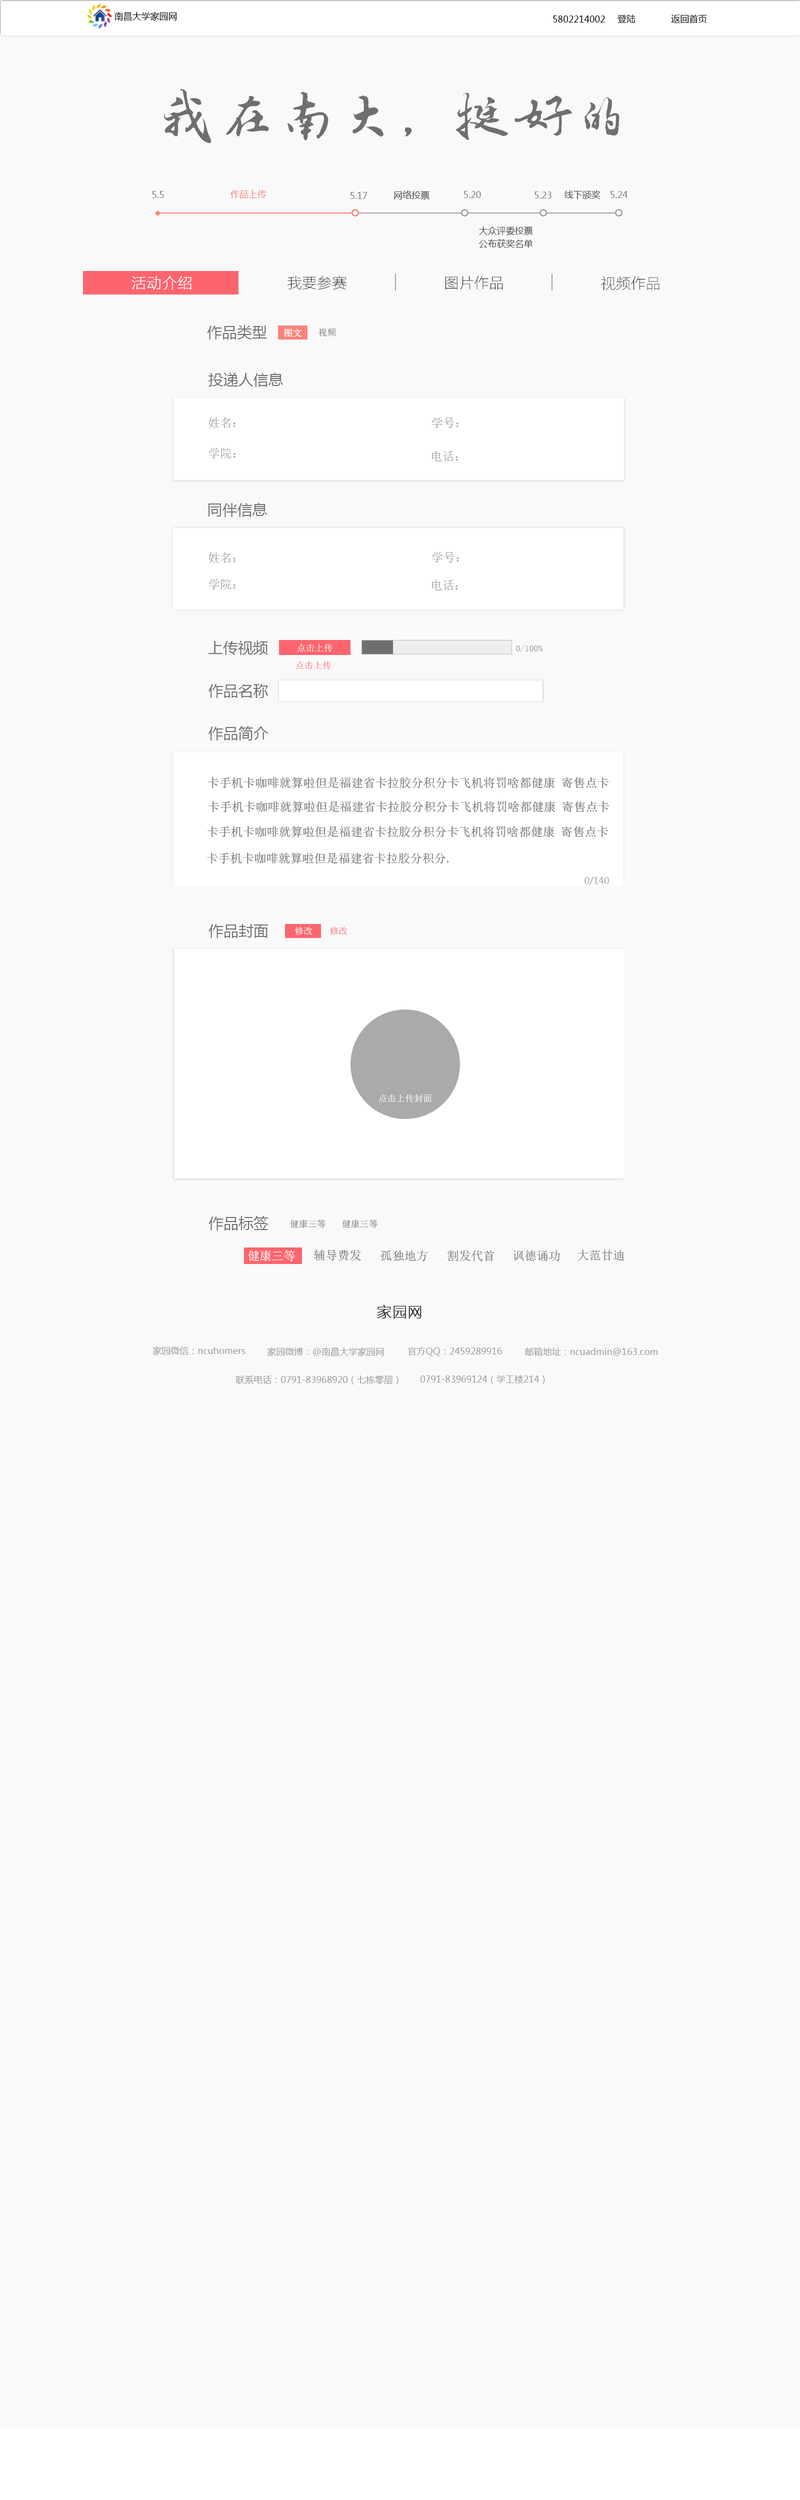
<style>
.page{position:relative;width:800px;height:2500px;background:#f9f9f9}
.page>*{position:absolute;margin:0}
.t1{font:9px "MicrosoftYaHei";color:#000000}
.t2{font:60px "FZZJ-LJDFONT";color:#6f6f6f}
.t3{font:9px "MicrosoftYaHei";color:#808080}
.t4{font:9px "MicrosoftYaHei";color:#fc837a}
.t5{font:9px "MicrosoftYaHei";color:#494949}
.t6{font:15px "FZLTCXHJW--GB1-0";color:#ffffff;font-weight:bold}
.t7{font:15px "FZLTCXHJW--GB1-0";color:#000000}
.t8{font:15px "MicrosoftYaHei";color:#6f6f6f}
.t9{font:9px "SimSun";color:#ffffff;font-weight:bold}
.t10{font:9px "SimSun";color:#6f6f6f}
.t11{font:12px "SimSun";color:#9e9e9e}
.t12{font:9px "SimSun";color:#ffffff}
.t13{font:9px "SimSun";color:#a0a0a0}
.t14{font:9px "SimSun";color:#fd656e}
.t15{font:9px "MicrosoftYaHei";color:#a4a4a4}
.t16{font:12px "SimSun";color:#ffffff}
.t17{font:12px "SimSun";color:#6f6f6f}
.t18{font:15px "FZLTCXHJW--GB1-0";color:#010101;font-weight:bold}
.t19{font:9px "MicrosoftYaHei";color:#9c9c9c}
</style>
<div class="page">
<p class="t1" style="left:114px;top:12px;width:63px;height:9px">南昌大学家园网</p>
<p class="t1" style="left:553px;top:16px;width:52px;height:6px">5802214002</p>
<p class="t1" style="left:618px;top:14px;width:18px;height:9px">登陆</p>
<p class="t1" style="left:671px;top:14px;width:36px;height:9px">返回首页</p>
<p class="t2" style="left:164px;top:89px;width:456px;height:55px">我在南大，挺好的</p>
<p class="t3" style="left:152px;top:191px;width:12px;height:7px">5.5</p>
<p class="t4" style="left:230px;top:190px;width:36px;height:8px">作品上传</p>
<p class="t3" style="left:350px;top:192px;width:18px;height:7px">5.17</p>
<p class="t5" style="left:394px;top:190px;width:36px;height:10px">网络投票</p>
<p class="t3" style="left:464px;top:191px;width:17px;height:7px">5.20</p>
<p class="t3" style="left:534px;top:192px;width:18px;height:6px">5.23</p>
<p class="t5" style="left:564px;top:190px;width:36px;height:9px">线下颁奖</p>
<p class="t3" style="left:610px;top:191px;width:18px;height:7px">5.24</p>
<p class="t5" style="left:479px;top:226px;width:54px;height:10px">大众评委投票</p>
<p class="t5" style="left:479px;top:239px;width:54px;height:9px">公布获奖名单</p>
<p class="t6" style="left:132px;top:276px;width:60px;height:14px">活动介绍</p>
<p class="t7" style="left:288px;top:276px;width:59px;height:14px">我要参赛</p>
<p class="t7" style="left:446px;top:276px;width:56px;height:14px">图片作品</p>
<p class="t7" style="left:601px;top:276px;width:59px;height:14px">视频作品</p>
<p class="t8" style="left:207px;top:325px;width:60px;height:15px">作品类型</p>
<p class="t9" style="left:284px;top:328px;width:18px;height:9px">图文</p>
<p class="t10" style="left:318px;top:328px;width:18px;height:8px">视频</p>
<p class="t8" style="left:208px;top:372px;width:76px;height:15px">投递人信息</p>
<p class="t11" style="left:208px;top:417px;width:28px;height:11px">姓名：</p>
<p class="t11" style="left:432px;top:417px;width:26px;height:11px">学号：</p>
<p class="t11" style="left:208px;top:448px;width:28px;height:11px">学院：</p>
<p class="t11" style="left:432px;top:450px;width:26px;height:12px">电话：</p>
<p class="t8" style="left:208px;top:502px;width:60px;height:15px">同伴信息</p>
<p class="t11" style="left:208px;top:552px;width:28px;height:12px">姓名：</p>
<p class="t11" style="left:432px;top:552px;width:27px;height:11px">学号：</p>
<p class="t11" style="left:208px;top:578px;width:28px;height:12px">学院：</p>
<p class="t11" style="left:432px;top:580px;width:26px;height:11px">电话：</p>
<p class="t8" style="left:208px;top:640px;width:60px;height:15px">上传视频</p>
<p class="t12" style="left:298px;top:644px;width:34px;height:8px">点击上传</p>
<p class="t13" style="left:516px;top:644px;width:27px;height:8px">0/100%</p>
<p class="t14" style="left:296px;top:661px;width:35px;height:9px">点击上传</p>
<p class="t8" style="left:208px;top:684px;width:60px;height:14px">作品名称</p>
<p class="t8" style="left:208px;top:726px;width:60px;height:14px">作品简介</p>
<p class="t15" style="left:584px;top:877px;width:25px;height:8px">0/140</p>
<p class="t8" style="left:208px;top:924px;width:60px;height:14px">作品封面</p>
<p class="t12" style="left:294px;top:926px;width:18px;height:9px">修改</p>
<p class="t14" style="left:330px;top:926px;width:18px;height:9px"><span class="t10"> </span>修改</p>
<p class="t12" style="left:378px;top:1094px;width:54px;height:8px">点击上传封面</p>
<p class="t8" style="left:208px;top:1216px;width:60px;height:14px">作品标签</p>
<p class="t10" style="left:290px;top:1220px;width:36px;height:8px">健康三等</p>
<p class="t10" style="left:342px;top:1220px;width:36px;height:8px">健康三等</p>
<p class="t16" style="left:248px;top:1250px;width:47px;height:12px">健康三等</p>
<p class="t17" style="left:314px;top:1250px;width:47px;height:11px">辅导费发</p>
<p class="t17" style="left:380px;top:1250px;width:48px;height:12px">孤独地方</p>
<p class="t17" style="left:448px;top:1250px;width:46px;height:12px">割发代首</p>
<p class="t17" style="left:513px;top:1250px;width:47px;height:12px">讽德诵功</p>
<p class="t17" style="left:578px;top:1250px;width:47px;height:11px">大范甘迪</p>
<p class="t18" style="left:377px;top:1304px;width:45px;height:15px">家园网</p>
<p class="t19" style="left:152px;top:1346px;width:94px;height:10px">家园微信：ncuhomers</p>
<p class="t19" style="left:267px;top:1347px;width:117px;height:9px">家园微博：@南昌大学家园网</p>
<p class="t19" style="left:408px;top:1346px;width:94px;height:10px">官方QQ：2459289916</p>
<p class="t19" style="left:525px;top:1348px;width:133px;height:8px">邮箱地址：ncuadmin@163.com</p>
<p class="t19" style="left:236px;top:1376px;width:162px;height:8px">联系电话：0791-83968920（七栋零层）</p>
<p class="t19" style="left:420px;top:1375px;width:125px;height:9px">0791-83969124（学工楼214）</p>
</div>
